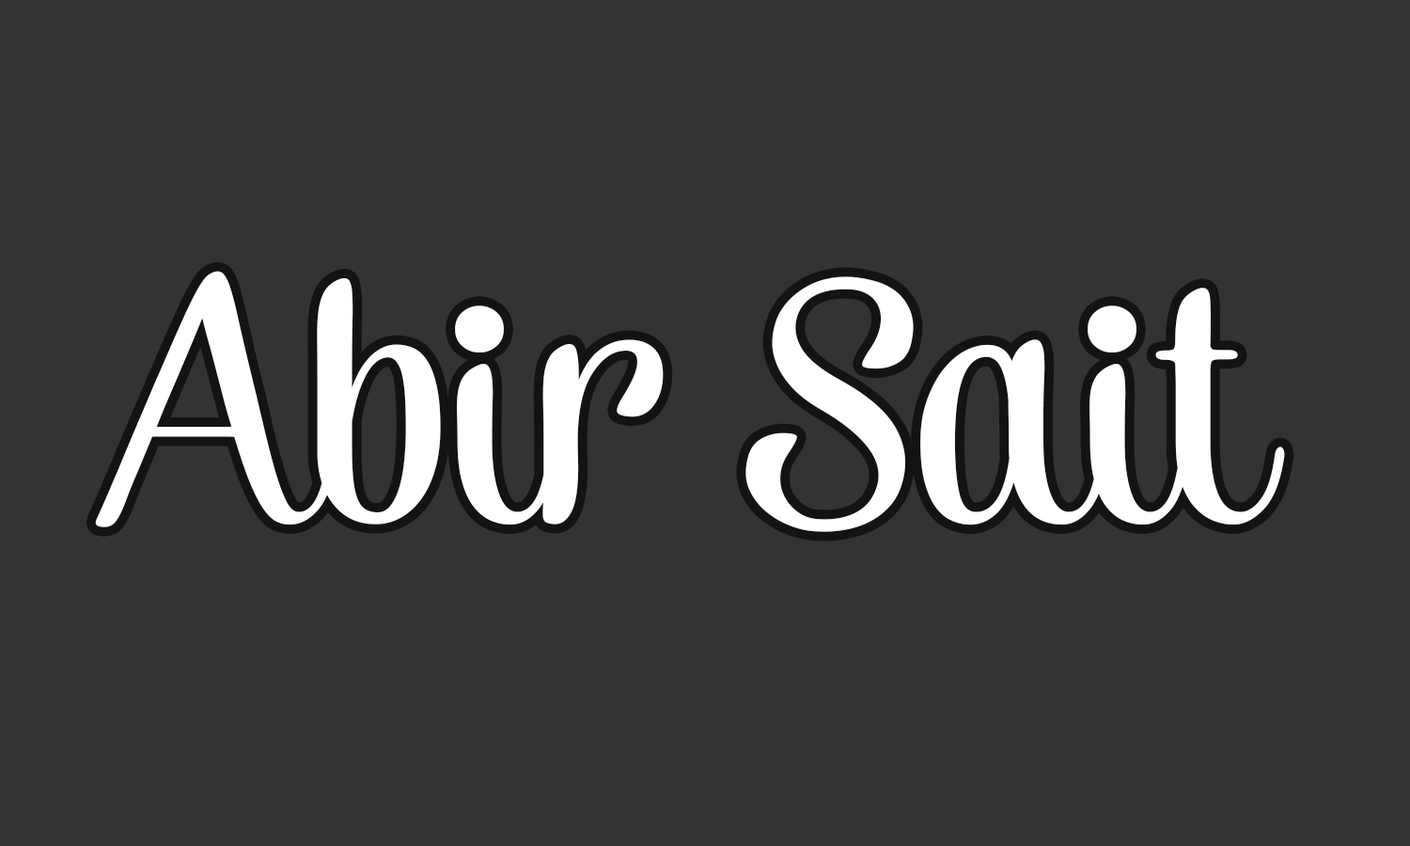
<style>
.page{position:relative;width:1410px;height:846px;background:#333333}
.page>*{position:absolute;margin:0}
.t1{font:485.6px "AlekRegularW00-Regular";color:#ffffff}
</style>
<div class="page">
<p class="t1" style="left:95px;top:271px;width:1190px;height:261px">Abir Sait</p>
</div>
